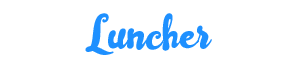
<style>
.page{position:relative;width:300px;height:70px;background:#ffffff}
.page>*{position:absolute;margin:0}
.t1{font:54.2px "SimplisickyFill";color:#1e90ff}
</style>
<div class="page">
<p class="t1" style="left:85px;top:13px;width:127px;height:42px">Luncher</p>
</div>
